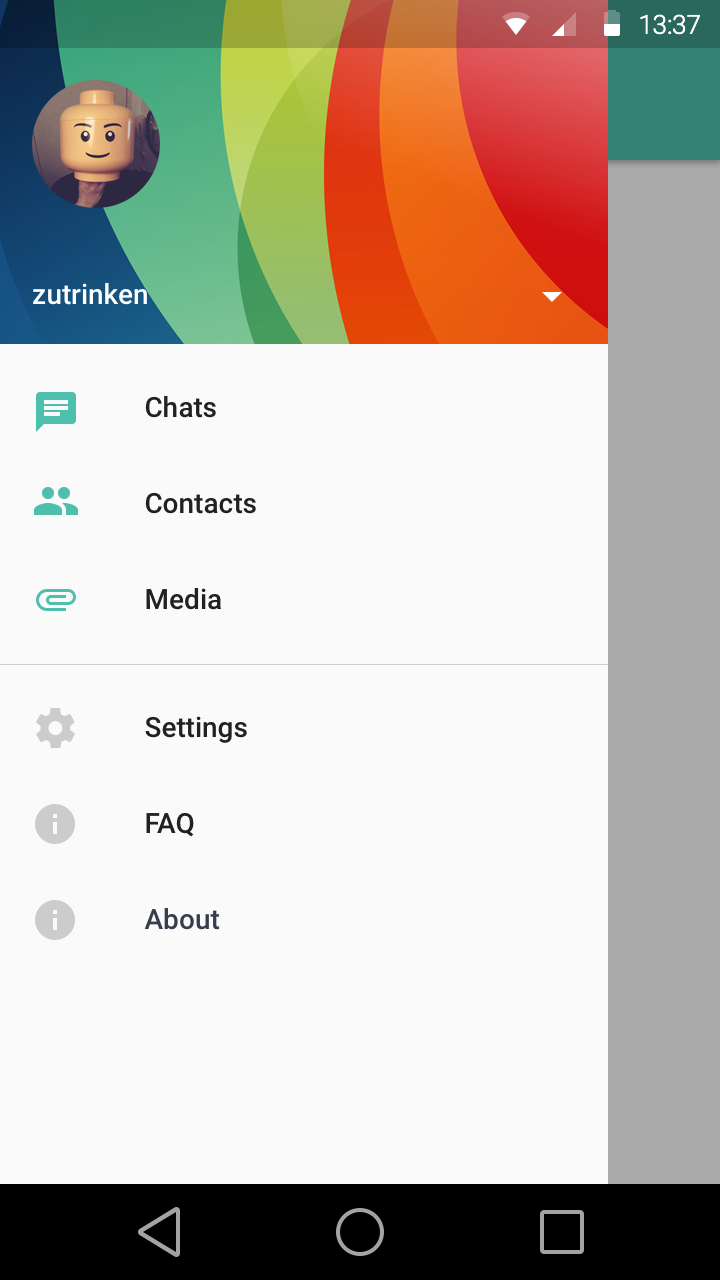
<style>
.page{position:relative;width:720px;height:1280px;background:#fafafa}
.page>*{position:absolute;margin:0}
.t1{font:28px "Roboto-Medium";color:#ffffff}
.t2{font:28px "Roboto-Medium";color:#212121}
.t3{font:28px "Roboto-Medium";color:#363d4d}
</style>
<div class="page">
<p class="t1" style="left:33px;top:283px;width:114px;height:22px">zutrinken</p>
<p class="t2" style="left:145px;top:396px;width:71px;height:22px">Chats</p>
<p class="t2" style="left:145px;top:492px;width:111px;height:22px">Contacts</p>
<p class="t2" style="left:146px;top:588px;width:75px;height:22px">Media</p>
<p class="t2" style="left:145px;top:716px;width:102px;height:27px">Settings</p>
<p class="t2" style="left:146px;top:812px;width:48px;height:25px">FAQ</p>
<p class="t3" style="left:144px;top:908px;width:76px;height:22px">About</p>
</div>
